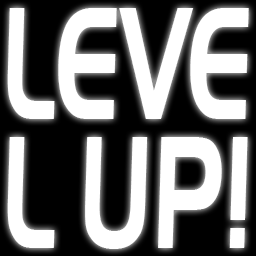
<style>
.page{position:relative;width:256px;height:256px;background:#ffffff}
.page>*{position:absolute;margin:0}
.t1{font:154.2px "HandelGothicTL-Regular";color:#ffffff;scale:0.62 1}
</style>
<div class="page">
<p class="t1" style="left:7px;top:8px;width:242px;height:111px">LEVE</p>
<p class="t1" style="left:7px;top:137px;width:48px;height:111px">L</p>
<p class="t1" style="left:85px;top:137px;width:163px;height:112px">UP!</p>
</div>
